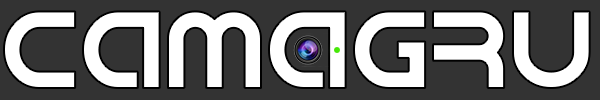
<style>
.page{position:relative;width:600px;height:100px;background:#333333}
.page>*{position:absolute;margin:0}
.t1{font:112px "IDroid";color:#ffffff}
</style>
<div class="page">
<p class="t1" style="left:4px;top:11px;width:586px;height:77px">CAMAGRU</p>
</div>
